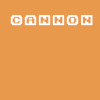
<style>
.page{position:relative;width:100px;height:100px;background:#e8994c}
.page>*{position:absolute;margin:0}
.t1{font:11px "SmallHollows";letter-spacing:0.025em;color:#ffffff}
</style>
<div class="page">
<p class="t1" style="left:10px;top:15px;width:83px;height:11px">CANNON</p>
</div>
